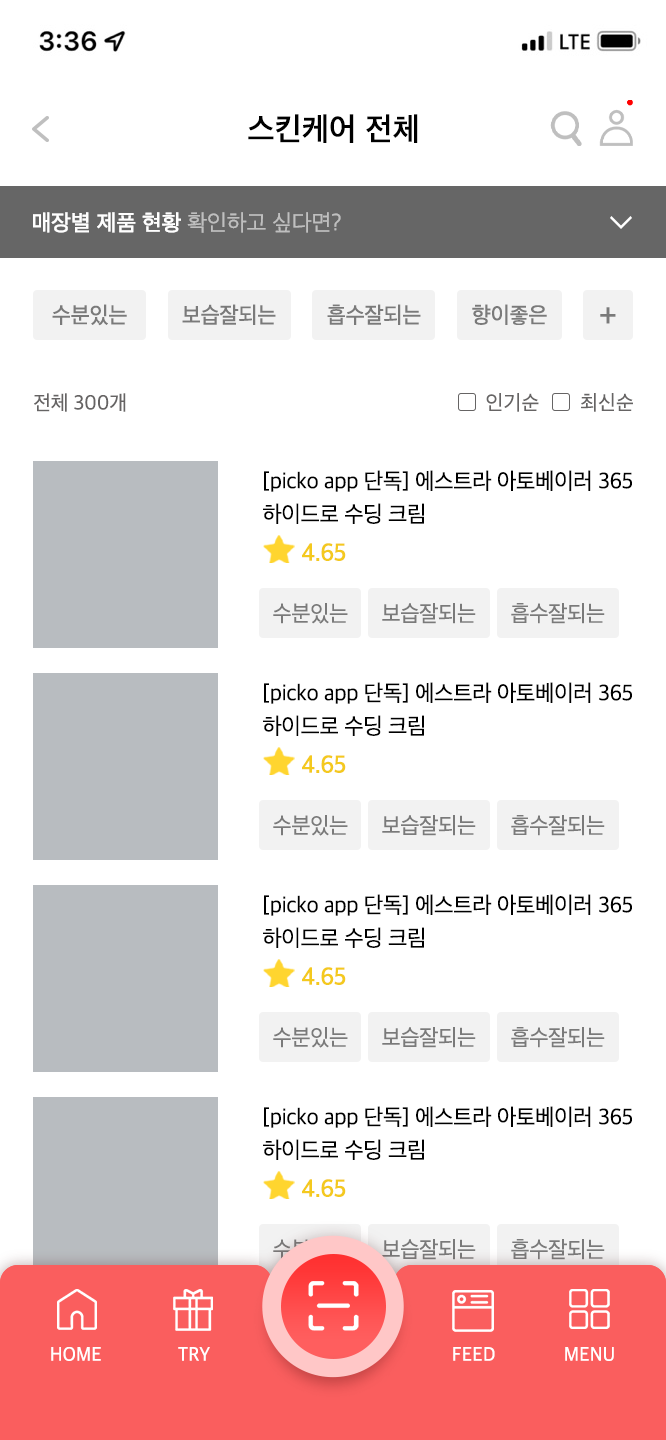
<style>
.page{position:relative;width:666px;height:1440px;background:#ffffff}
.page>*{position:absolute;margin:0}
.t1{font:32px "AppleSDGothicNeo-SemiBold";letter-spacing:0.017em;color:#000000;scale:0.97 1}
.t2{font:23px "AppleSDGothicNeo-Medium";color:#ffffff}
.t3{font:23px "AppleSDGothicNeo-Light";color:#bfbfbf}
.t4{font:23px "AppleSDGothicNeo-Medium";letter-spacing:-0.01em;color:#7a7a7a;scale:0.96 1}
.t5{font:35px "AppleSDGothicNeo-Medium";letter-spacing:-0.01em;color:#7a7a7a;scale:0.96 1}
.t6{font:21px "AppleSDGothicNeo-Regular";letter-spacing:-0.01em;color:#666464;scale:0.97 1}
.t7{font:21px "AppleSDGothicNeo-Regular";letter-spacing:0.017em;color:#666464;scale:0.97 1}
.t8{font:23px/33px "AppleSDGothicNeo-Regular";letter-spacing:-0.01em;color:#000000;scale:0.97 1}
.t9{font:25.1px "AppleSDGothicNeo-SemiBold";letter-spacing:-0.01em;color:#f4c91e;scale:0.96 1}
.t10{font:23px "AppleSDGothicNeo-Regular";letter-spacing:-0.01em;color:#7a7a7a;scale:0.96 1}
.t11{font:20px "AppleSDGothicNeo-Medium";letter-spacing:0.01em;color:#ffffff;scale:0.96 1}
</style>
<div class="page">
<p class="t1" style="left:248px;top:114px;width:170px;height:29px">스킨케어 전체</p>
<p class="t2" style="left:33px;top:212px;width:308px;height:21px">매장별 제품 현황 <span class="t3">확인하고 싶다면?</span></p>
<p class="t4" style="left:52px;top:304px;width:75px;height:22px">수분있는</p>
<p class="t4" style="left:182px;top:304px;width:94px;height:21px">보습잘되는</p>
<p class="t4" style="left:327px;top:304px;width:94px;height:21px">흡수잘되는</p>
<p class="t4" style="left:472px;top:304px;width:75px;height:21px">향이좋은</p>
<p class="t5" style="left:600px;top:307px;width:16px;height:17px">+</p>
<p class="t6" style="left:34px;top:393px;width:92px;height:19px">전체 300개</p>
<p class="t7" style="left:486px;top:393px;width:53px;height:19px">인기순</p>
<p class="t7" style="left:581px;top:393px;width:52px;height:19px">최신순</p>
<p class="t8" style="left:263px;top:470px;width:369px;height:54px">[picko app 단독] 에스트라 아토베이러 365<br>하이드로 수딩 크림</p>
<p class="t9" style="left:302px;top:543px;width:44px;height:18px">4.65</p>
<p class="t10" style="left:273px;top:603px;width:75px;height:21px">수분있는</p>
<p class="t10" style="left:382px;top:603px;width:94px;height:21px">보습잘되는</p>
<p class="t10" style="left:511px;top:603px;width:94px;height:21px">흡수잘되는</p>
<p class="t8" style="left:263px;top:682px;width:369px;height:54px">[picko app 단독] 에스트라 아토베이러 365<br>하이드로 수딩 크림</p>
<p class="t9" style="left:302px;top:755px;width:44px;height:18px">4.65</p>
<p class="t10" style="left:273px;top:815px;width:75px;height:21px">수분있는</p>
<p class="t10" style="left:382px;top:815px;width:94px;height:21px">보습잘되는</p>
<p class="t10" style="left:511px;top:815px;width:94px;height:21px">흡수잘되는</p>
<p class="t8" style="left:263px;top:894px;width:369px;height:54px">[picko app 단독] 에스트라 아토베이러 365<br>하이드로 수딩 크림</p>
<p class="t9" style="left:302px;top:967px;width:44px;height:18px">4.65</p>
<p class="t10" style="left:273px;top:1027px;width:75px;height:21px">수분있는</p>
<p class="t10" style="left:382px;top:1027px;width:94px;height:21px">보습잘되는</p>
<p class="t10" style="left:511px;top:1027px;width:94px;height:21px">흡수잘되는</p>
<p class="t8" style="left:263px;top:1106px;width:369px;height:54px">[picko app 단독] 에스트라 아토베이러 365<br>하이드로 수딩 크림</p>
<p class="t9" style="left:302px;top:1179px;width:44px;height:18px">4.65</p>
<p class="t10" style="left:382px;top:1239px;width:94px;height:21px">보습잘되는</p>
<p class="t10" style="left:511px;top:1239px;width:94px;height:21px">흡수잘되는</p>
<p class="t11" style="left:51px;top:1347px;width:50px;height:14px">HOME</p>
<p class="t11" style="left:178px;top:1347px;width:32px;height:14px">TRY</p>
<p class="t11" style="left:453px;top:1347px;width:42px;height:14px">FEED</p>
<p class="t11" style="left:565px;top:1347px;width:49px;height:14px">MENU</p>
</div>
